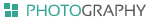
<style>
.page{position:relative;width:150px;height:20px;background:#ffffff}
.page>*{position:absolute;margin:0}
.t1{font:16px "Sansation-Regular";color:#585858}
.t2{font:16px "Sansation-Regular";color:#32a692}
</style>
<div class="page">
<p class="t1" style="left:27px;top:4px;width:119px;height:13px"><span class="t2">PHOTO</span>GRAPHY</p>
</div>
